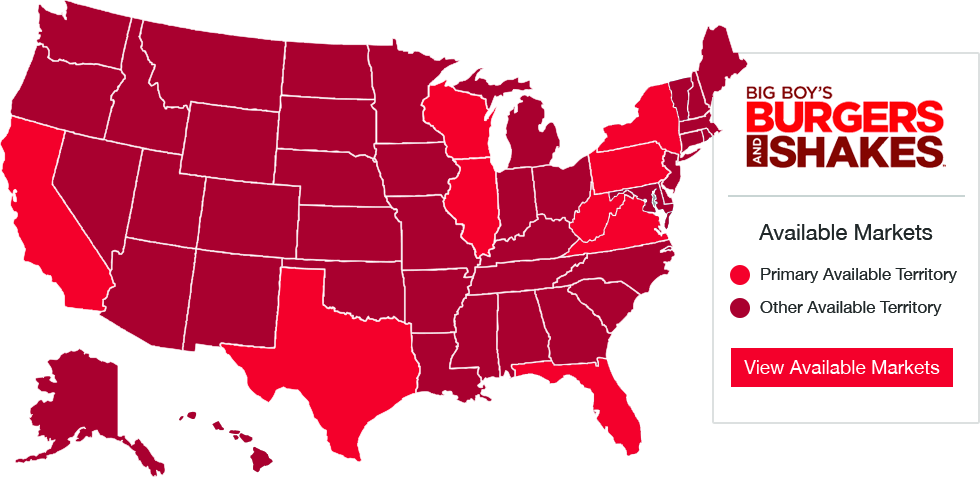
<style>
.page{position:relative;width:980px;height:477px;background:#ffffff}
.page>*{position:absolute;margin:0}
.t1{font:22px "HelveticaNeue";color:#202728}
.t2{font:17px "HelveticaNeue";color:#202728}
.t3{font:19px "HelveticaNeue";color:#ffffff}
</style>
<div class="page">
<p class="t1" style="left:759px;top:224px;width:174px;height:16px">Available Markets</p>
<p class="t2" style="left:761px;top:268px;width:196px;height:15px">Primary Available Territory</p>
<p class="t2" style="left:760px;top:301px;width:182px;height:15px">Other Available Territory</p>
<p class="t3" style="left:744px;top:360px;width:196px;height:14px">View Available Markets</p>
</div>
